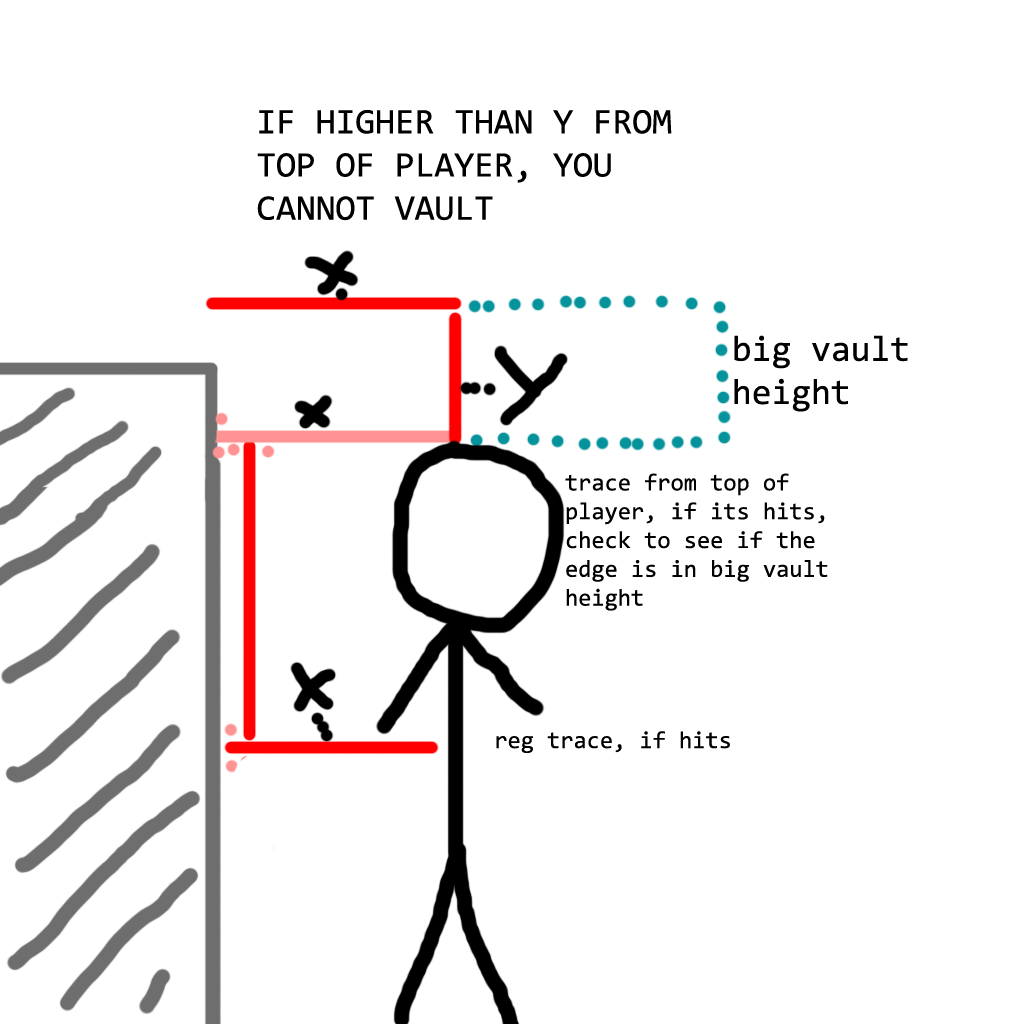
<style>
.page{position:relative;width:1024px;height:1024px;background:#ffffff}
.page>*{position:absolute;margin:0}
.t1{font:36px "Consolas";color:#000000}
.t2{font:24px "Consolas";color:#000000}
</style>
<div class="page">
<p class="t1" style="left:257px;top:110px;width:415px;height:111px">IF HIGHER THAN Y FROM TOP OF PLAYER, YOU CANNOT VAULT</p>
<p class="t1" style="left:734px;top:335px;width:174px;height:77px">big vault height</p>
<p class="t2" style="left:565px;top:473px;width:263px;height:138px">trace from top of player, if its hits, check to see if the edge is in big vault height</p>
<p class="t2" style="left:496px;top:731px;width:234px;height:22px">reg trace, if hits</p>
</div>
